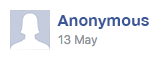
<style>
.page{position:relative;width:157px;height:58px;background:#ffffff}
.page>*{position:absolute;margin:0}
.t1{font:16.3px "HelveticaNeue-Bold";color:#3b5998}
</style>
<div class="page">
<p class="t1" style="left:57px;top:15px;width:92px;height:14px">Anonymous</p>
</div>
